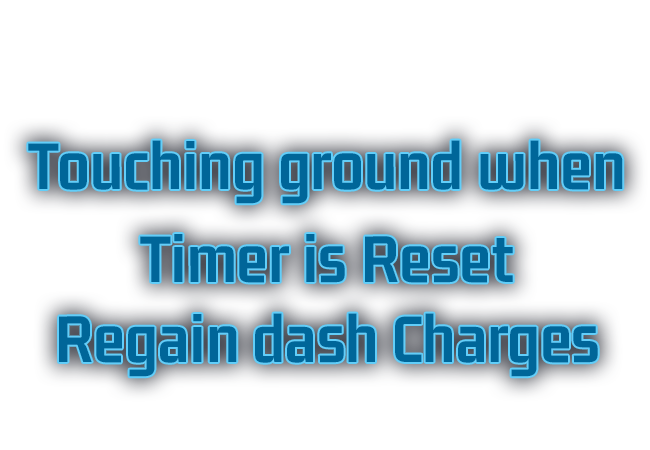
<style>
.page{position:relative;width:650px;height:450px;background:#ffffff}
.page>*{position:absolute;margin:0}
.t1{font:71.7px "GemunuLibre-Bold";color:#006699;font-weight:bold}
</style>
<div class="page">
<p class="t1" style="left:28px;top:140px;width:595px;height:64px">Touching ground when</p>
<p class="t1" style="left:140px;top:234px;width:373px;height:49px">Timer is Reset</p>
<p class="t1" style="left:59px;top:313px;width:539px;height:64px">Regain dash Charges</p>
</div>
